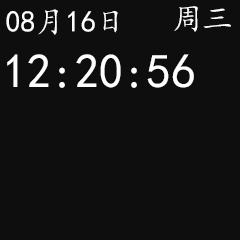
<style>
.page{position:relative;width:240px;height:240px;background:#0e0e0e}
.page>*{position:absolute;margin:0}
.t1{font:30px "KaiTi";color:#ffffff}
.t2{font:48px "KaiTi";color:#ffffff}
</style>
<div class="page">
<p class="t1" style="left:174px;top:6px;width:57px;height:26px">周三</p>
<p class="t1" style="left:6px;top:9px;width:112px;height:26px">08月16日</p>
<p class="t2" style="left:7px;top:54px;width:187px;height:34px">12:20:56</p>
</div>
